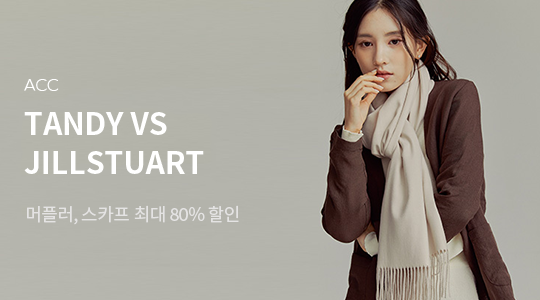
<style>
.page{position:relative;width:540px;height:300px}
.page>*{position:absolute;margin:0}
.t1{font:16px "NanumBarunGothicLight";letter-spacing:0.015em;color:#ffffff;scale:1.1 1}
.t2{font:30px "NotoSansKR-Bold";color:#ffffff}
.t3{font:18px "NotoSansKR-Regular";letter-spacing:-0.03em;color:#e4e3e3}
</style>
<div class="page">
<p class="t1" style="left:24px;top:79px;width:35px;height:12px">ACC</p>
<p class="t2" style="left:24px;top:112px;width:143px;height:23px">TANDY VS</p>
<p class="t2" style="left:24px;top:151px;width:180px;height:23px">JILLSTUART</p>
<p class="t3" style="left:27px;top:205px;width:212px;height:20px">머플러, 스카프 최대 80% 할인</p>
</div>
